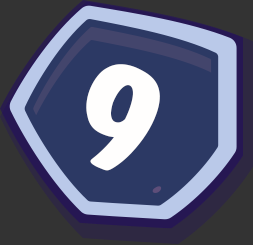
<style>
.page{position:relative;width:253px;height:245px;background:#2c3964}
.page>*{position:absolute;margin:0}
.t1{font:120px "KomikaAxis";color:#fffefd}
</style>
<div class="page">
<p class="t1" style="left:86px;top:64px;width:74px;height:107px">9</p>
</div>
